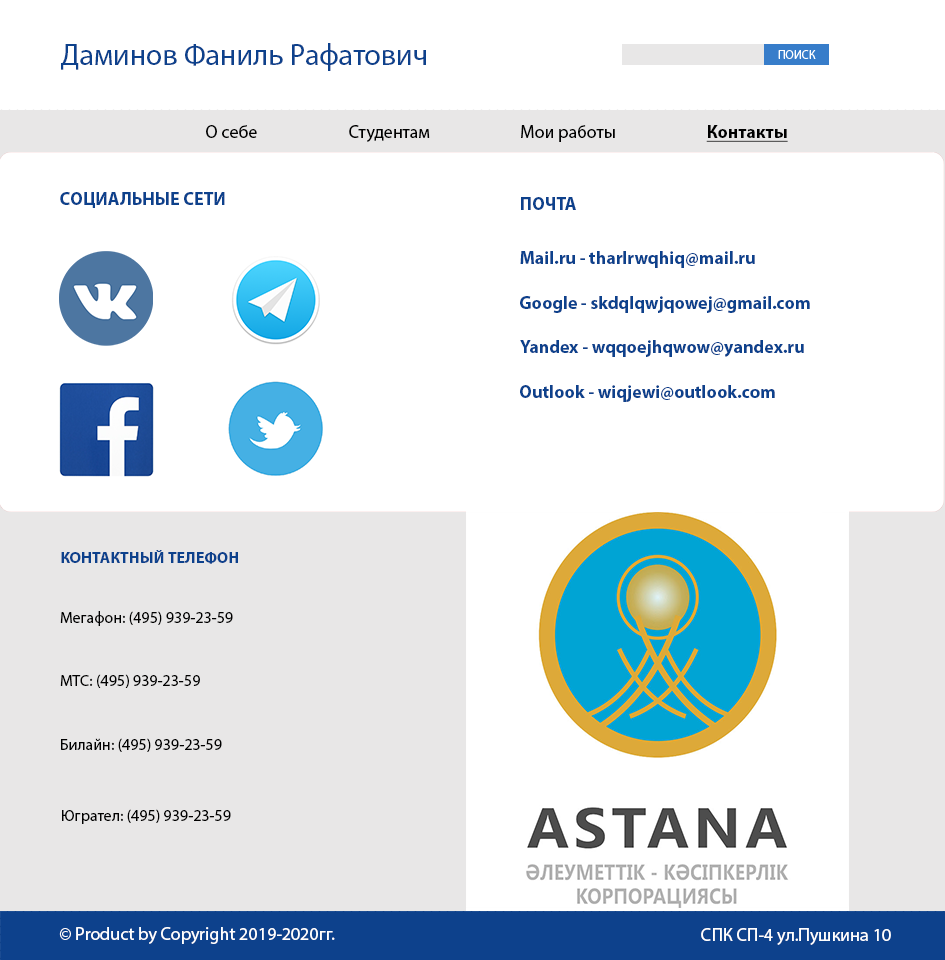
<style>
.page{position:relative;width:945px;height:960px;background:#ffffff}
.page>*{position:absolute;margin:0}
.t1{font:30px "MyriadPro-Regular";color:#0d418c}
.t2{font:18px "MyriadPro-Regular";color:#010101}
.t3{font:18px "MyriadPro-Bold";color:#000000;text-decoration:underline}
.t4{font:18px "MyriadPro-Bold";color:#0d418c;text-transform:uppercase}
.t5{font:18px "MyriadPro-Bold";color:#0d418c}
.t6{font:16px "MyriadPro-Bold";color:#0d418c;text-transform:uppercase}
.t7{font:16px "MyriadPro-Regular";color:#010101}
.t8{font:18px "MyriadPro-Regular";color:#ffffff}
</style>
<div class="page">
<p class="t1" style="left:61px;top:43px;width:365px;height:28px">Даминов Фаниль Рафатович</p>
<p class="t2" style="left:206px;top:125px;width:51px;height:13px">О себе</p>
<p class="t2" style="left:349px;top:125px;width:81px;height:17px">Студентам</p>
<p class="t2" style="left:521px;top:125px;width:94px;height:17px">Мои работы</p>
<p class="t3" style="left:706px;top:125px;width:82px;height:17px">Контакты</p>
<p class="t4" style="left:60px;top:192px;width:165px;height:16px">Социальные сети</p>
<p class="t4" style="left:521px;top:197px;width:55px;height:13px">пОЧТА</p>
<p class="t5" style="left:520px;top:251px;width:235px;height:17px">Mail.ru - tharlrwqhiq@mail.ru</p>
<p class="t5" style="left:520px;top:296px;width:290px;height:17px">Google - skdqlqwjqowej@gmail.com</p>
<p class="t5" style="left:520px;top:340px;width:284px;height:17px">Yandex - wqqoejhqwow@yandex.ru</p>
<p class="t5" style="left:520px;top:385px;width:255px;height:17px">Outlook - wiqjewi@outlook.com</p>
<p class="t6" style="left:61px;top:550px;width:177px;height:14px">кОНТАКТНЫЙ ТЕЛЕФОН</p>
<p class="t7" style="left:60px;top:611px;width:173px;height:15px">Мегафон: (495) 939-23-59</p>
<p class="t7" style="left:60px;top:674px;width:140px;height:14px">МТС: (495) 939-23-59</p>
<p class="t7" style="left:61px;top:738px;width:161px;height:14px">Билайн: (495) 939-23-59</p>
<p class="t7" style="left:62px;top:809px;width:169px;height:15px">Югрател: (495) 939-23-59</p>
<p class="t8" style="left:59px;top:927px;width:276px;height:17px">© Product by Copyright 2019-2020гг.</p>
<p class="t8" style="left:701px;top:928px;width:190px;height:17px">СПК СП-4 ул.Пушкина 10</p>
</div>
